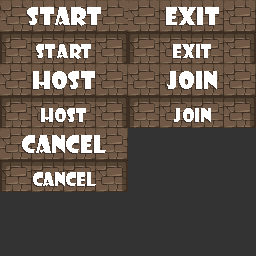
<style>
.page{position:relative;width:256px;height:256px;background:#333333}
.page>*{position:absolute;margin:0}
.t1{font:24px "ShowcardGothic-Reg";color:#ffffff}
.t2{font:18px "ShowcardGothic-Reg";color:#ffffff}
</style>
<div class="page">
<p class="t1" style="left:27px;top:7px;width:74px;height:19px">Start</p>
<p class="t1" style="left:166px;top:7px;width:53px;height:18px">Exit</p>
<p class="t2" style="left:36px;top:44px;width:55px;height:15px">Start</p>
<p class="t2" style="left:173px;top:44px;width:38px;height:14px">exit</p>
<p class="t1" style="left:33px;top:71px;width:62px;height:18px">host</p>
<p class="t1" style="left:167px;top:71px;width:50px;height:18px">join</p>
<p class="t2" style="left:41px;top:108px;width:45px;height:14px">host</p>
<p class="t2" style="left:174px;top:108px;width:37px;height:14px">join</p>
<p class="t1" style="left:22px;top:135px;width:84px;height:18px">CANCEL</p>
<p class="t2" style="left:33px;top:172px;width:63px;height:14px">cancel</p>
</div>
